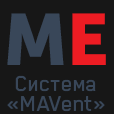
<style>
.page{position:relative;width:114px;height:114px;background:#171717}
.page>*{position:absolute;margin:0}
.t1{font:72px "MuseoSansCyrl-900";color:#394759;text-transform:uppercase}
.t2{font:72px "MuseoSansCyrl-900";color:#ed1c23;text-transform:uppercase}
.t3{font:24px/20px "BlenderPro-Medium";color:#394759}
</style>
<div class="page">
<p class="t1" style="left:7px;top:13px;width:99px;height:52px">M<span class="t2">e</span></p>
<p class="t3" style="left:7px;top:75px;width:98px;height:37px;text-align:center">Система<br> «MAVent»</p>
</div>
